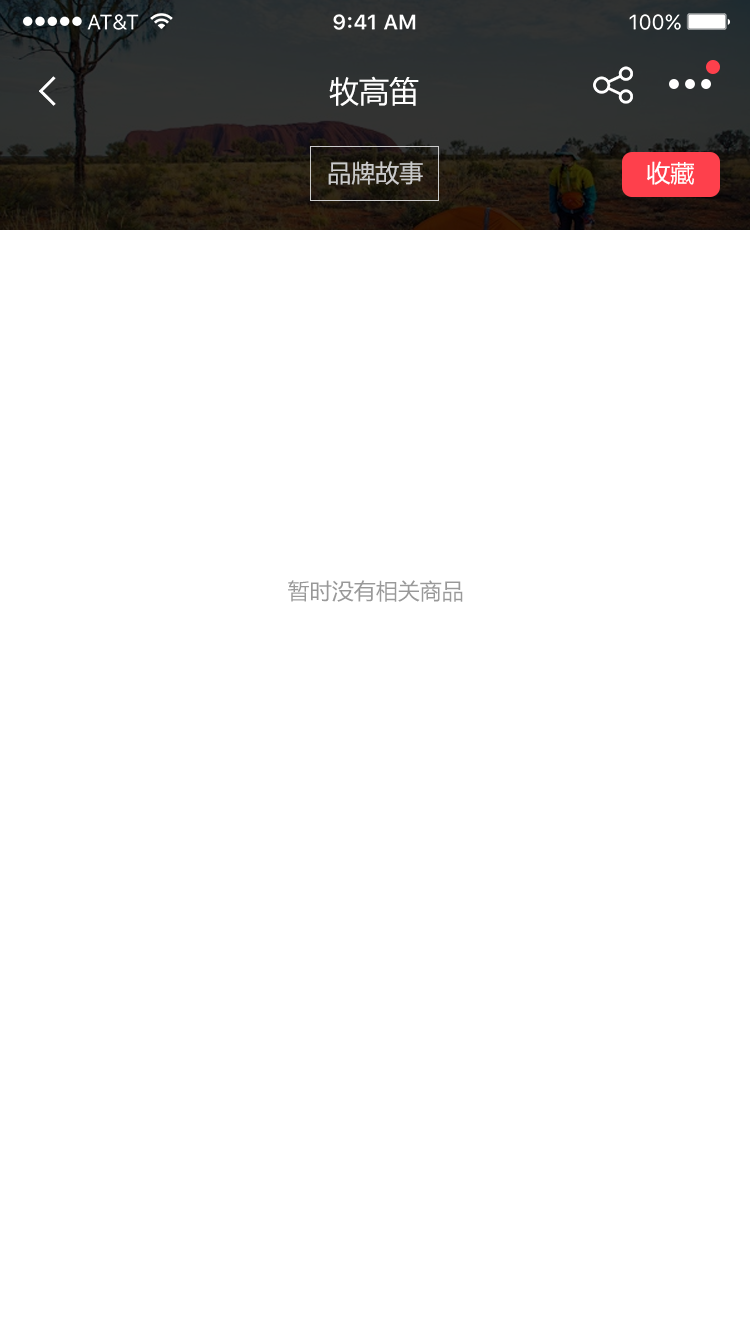
<style>
.page{position:relative;width:750px;height:1335px;background:#ffffff}
.page>*{position:absolute;margin:0}
.t1{font:30px "MicrosoftYaHei";color:#ffffff}
.t2{font:24px "MicrosoftYaHei";color:#cccccc}
.t3{font:24px "MicrosoftYaHei";color:#ffffff}
.t4{font:22px "MicrosoftYaHei";color:#999999}
</style>
<div class="page">
<p class="t1" style="left:329px;top:76px;width:90px;height:30px">牧高笛</p>
<p class="t2" style="left:328px;top:161px;width:95px;height:24px">品牌故事</p>
<p class="t3" style="left:647px;top:161px;width:47px;height:24px">收藏</p>
<p class="t4" style="left:288px;top:580px;width:175px;height:22px">暂时没有相关商品</p>
</div>
